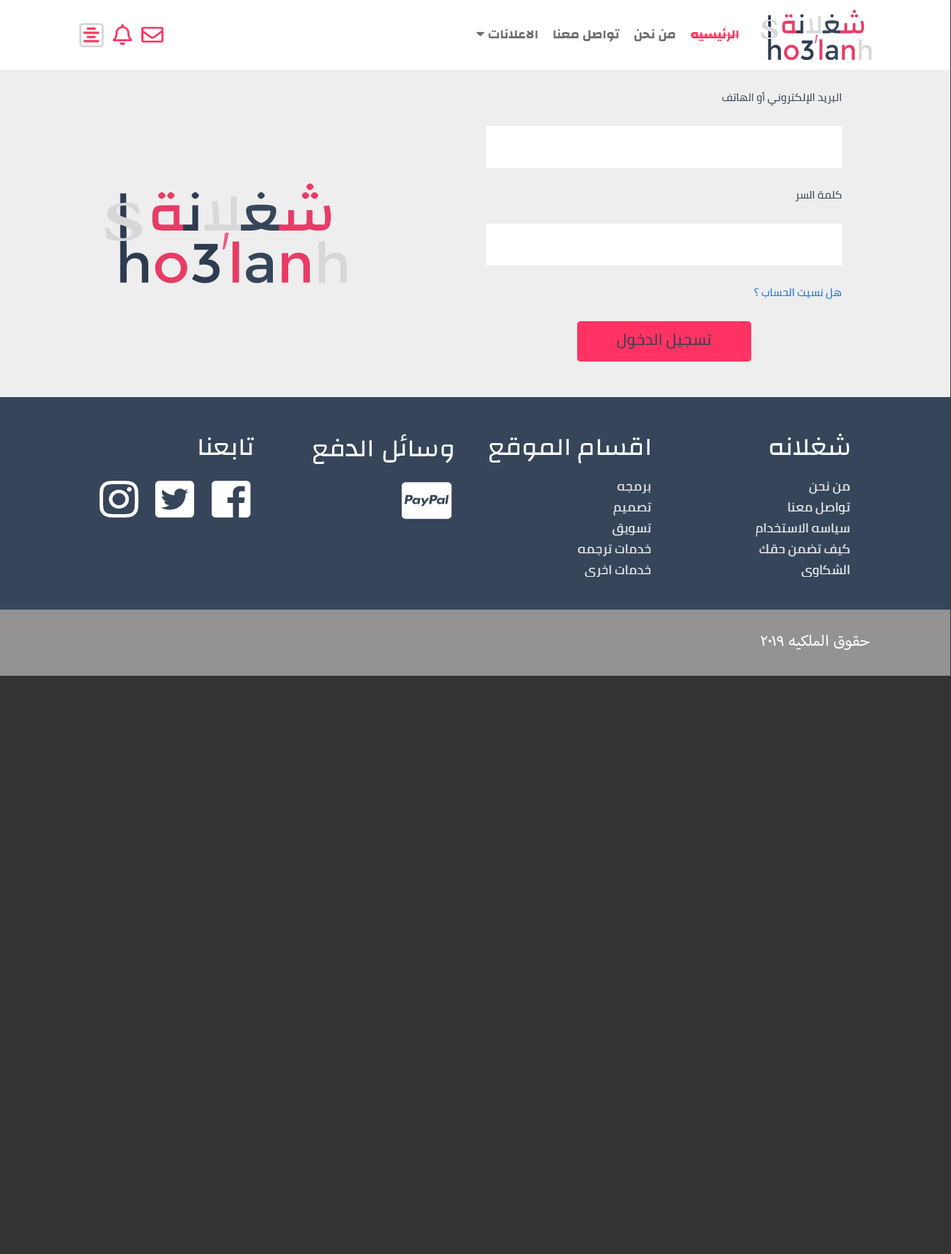
<style>
.page{position:relative;width:951px;height:1254px;background:#333333}
.page>*{position:absolute;margin:0}
.t1{font:10.4px "Cairo";color:#364559;text-transform:uppercase;scale:1.06 1}
.t2{font:10.4px "Cairo";color:#1772ec;text-transform:uppercase;scale:1.06 1}
.t3{font:15.3px "Cairo";color:#2d3c50;text-transform:uppercase;scale:1.06 1}
.t4{font:25.1px "Changa-Regular";color:#ffffff;text-transform:uppercase;scale:1.06 1}
.t5{font:12.5px/20.9px "Cairo-Regular";color:#ffffff;text-transform:uppercase;scale:1.06 1}
.t6{font:20.9px "MyriadArabic-Regular";color:#ffffff;text-transform:uppercase;scale:1.06 1}
</style>
<div class="page">
<p class="t1" style="left:722px;top:91px;width:119px;height:15px">البريد الإلكتروني أو الهاتف</p>
<p class="t1" style="left:795px;top:191px;width:47px;height:10px">كلمة السر</p>
<p class="t2" style="left:754px;top:288px;width:87px;height:11px">هل نسيت الحساب ؟</p>
<p class="t3" style="left:617px;top:334px;width:95px;height:15px">تسجيل الدخول</p>
<p class="t4" style="left:199px;top:437px;width:55px;height:23px">تابعنا</p>
<p class="t4" style="left:313px;top:434px;width:140px;height:30px">وسائل الدفع</p>
<p class="t4" style="left:490px;top:437px;width:160px;height:26px">اقسام الموقع</p>
<p class="t4" style="left:770px;top:433px;width:80px;height:22px">شغلانه</p>
<p class="t5" style="left:578px;top:483px;width:74px;height:94px">برمجه <br>تصميم<br>تسويق <br>خدمات ترجمه<br>خدمات اخرى</p>
<p class="t5" style="left:756px;top:481px;width:94px;height:96px">من نحن<br>تواصل معنا<br>سياسه الاستخدام <br>كيف تضمن حقك<br>الشكاوى</p>
<p class="t6" style="left:760px;top:634px;width:110px;height:16px">حقوق الملكيه 2019</p>
</div>
